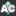
<style>
.page{position:relative;width:16px;height:16px;background:#333333}
.page>*{position:absolute;margin:0}
.t1{font:9.4px "Arial-Black";color:#fffefe}
</style>
<div class="page">
<p class="t1" style="left:1px;top:5px;width:14px;height:7px">AC</p>
</div>
